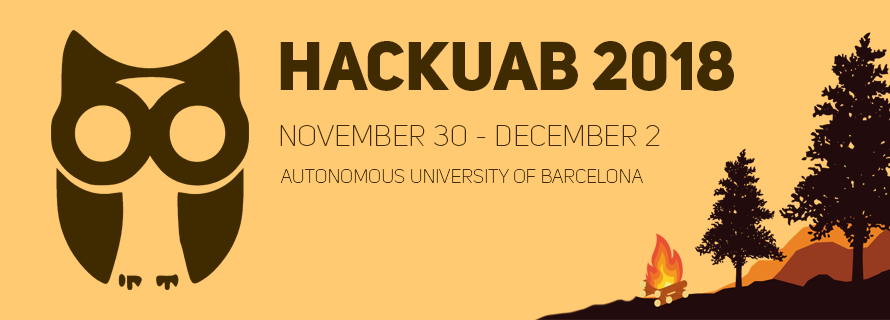
<style>
.page{position:relative;width:890px;height:320px;background:#ffca71}
.page>*{position:absolute;margin:0}
.t1{font:68px "UniSansHeavyCAPS";color:#402a00}
.t2{font:29px "UniSansThinCAPS";color:#402a00}
.t3{font:19px "UniSansThinCAPS";color:#402a00}
</style>
<div class="page">
<p class="t1" style="left:280px;top:41px;width:454px;height:50px">HackUAB 2018</p>
<p class="t2" style="left:280px;top:125px;width:380px;height:21px">November 30 - December 2</p>
<p class="t3" style="left:281px;top:169px;width:362px;height:14px">autonomous university of barcelona</p>
</div>
